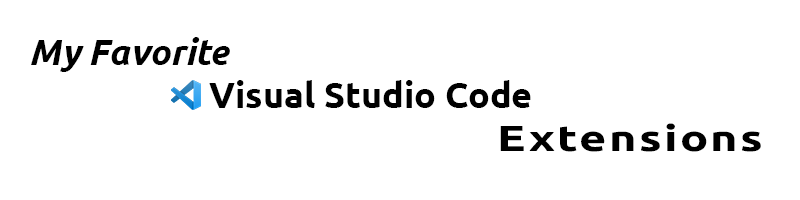
<style>
.page{position:relative;width:800px;height:200px;background:#ffffff}
.page>*{position:absolute;margin:0}
.t1{font:36px "UbuntuNerdFontComplete-Bold";color:#000000}
.t2{font:36px "UbuntuNerdFontComplete-BoldItalic";color:#000000}
.t3{font:36px "UbuntuNerdFontComplete-Bold";letter-spacing:0.05em;color:#000000;scale:1.3 1}
</style>
<div class="page">
<p class="t1" style="left:31px;top:37px;width:730px;height:115px"><span class="t2">My Favorite<br></span>     Visual Studio Code<br>             <span class="t3">Extensions</span></p>
</div>
